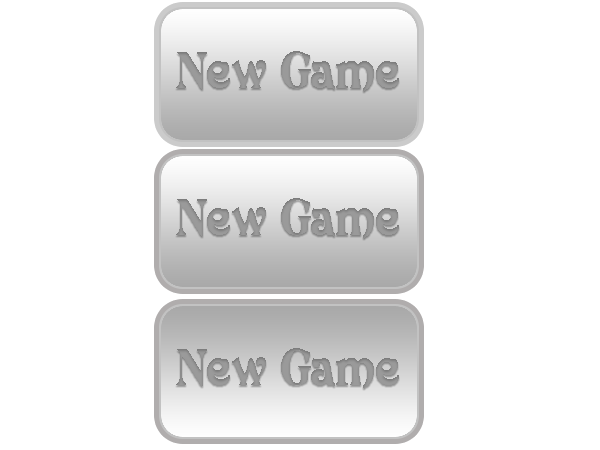
<style>
.page{position:relative;width:600px;height:450px;background:#ffffff}
.page>*{position:absolute;margin:0}
.t1{font:50px "Avatar";color:#969696}
</style>
<div class="page">
<p class="t1" style="left:176px;top:51px;width:223px;height:40px">New Game</p>
<p class="t1" style="left:176px;top:198px;width:223px;height:40px">New Game</p>
<p class="t1" style="left:176px;top:348px;width:223px;height:40px">New Game</p>
</div>
